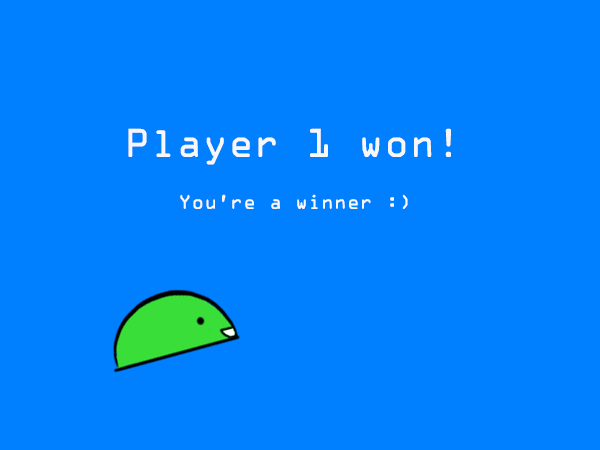
<style>
.page{position:relative;width:600px;height:450px;background:#007fff}
.page>*{position:absolute;margin:0}
.t1{font:36px "OCRAStd";color:#f7f7f7}
.t2{font:18px "OCRAStd";color:#f7f7f7}
</style>
<div class="page">
<p class="t1" style="left:128px;top:128px;width:323px;height:37px">Player 1 won!</p>
<p class="t2" style="left:180px;top:194px;width:228px;height:15px">You’re a winner :)</p>
</div>
